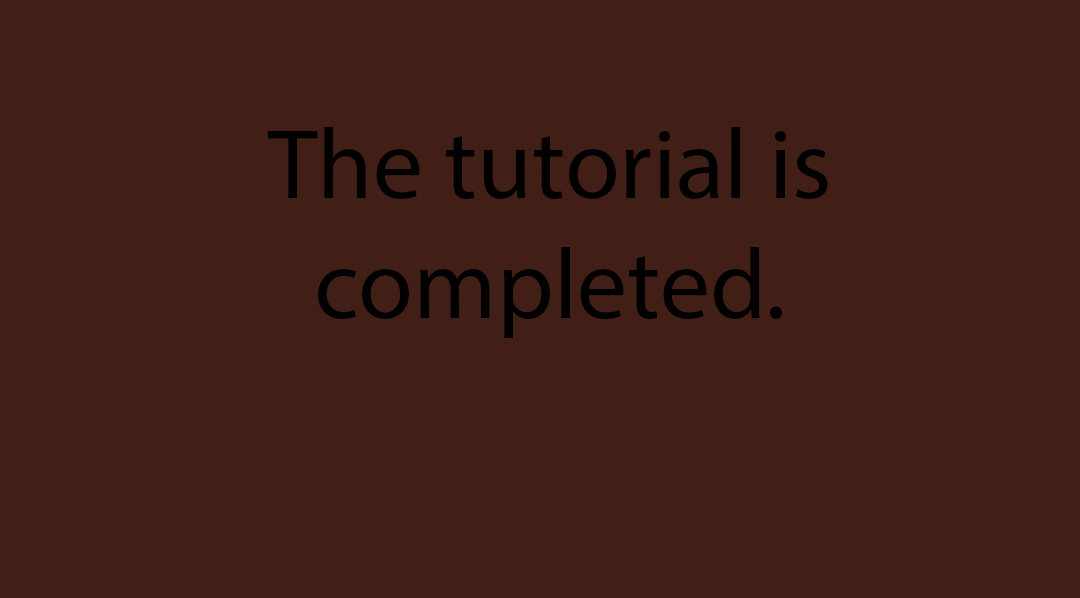
<style>
.page{position:relative;width:1080px;height:598px;background:#421f16}
.page>*{position:absolute;margin:0}
.t1{font:100px "MyriadPro-Regular";color:#000000}
</style>
<div class="page">
<p class="t1" style="left:267px;top:127px;width:561px;height:211px;text-align:center">The tutorial is completed.</p>
</div>
